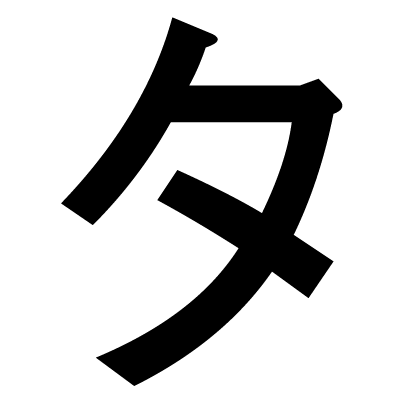
<style>
.page{position:relative;width:400px;height:400px;background:#ffffff}
.page>*{position:absolute;margin:0}
.t1{font:424.8px "MS-PGothic";color:#000000}
</style>
<div class="page">
<p class="t1" style="left:61px;top:17px;width:282px;height:369px">タ</p>
</div>
